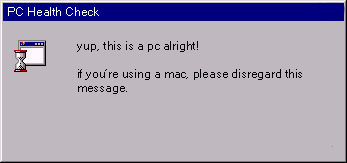
<style>
.page{position:relative;width:347px;height:163px;background:#bfb8bf}
.page>*{position:absolute;margin:0}
.t1{font:12px "MicrosoftSansSerif";color:#ffffff}
.t2{font:12px "MicrosoftSansSerif";color:#000000}
</style>
<div class="page">
<p class="t1" style="left:8px;top:7px;width:91px;height:9px">PC Health Check</p>
<p class="t2" style="left:77px;top:41px;width:121px;height:11px">yup, this is a pc alright!</p>
<p class="t2" style="left:78px;top:69px;width:224px;height:25px">if you’re using a mac, please disregard this <br>message.</p>
</div>
